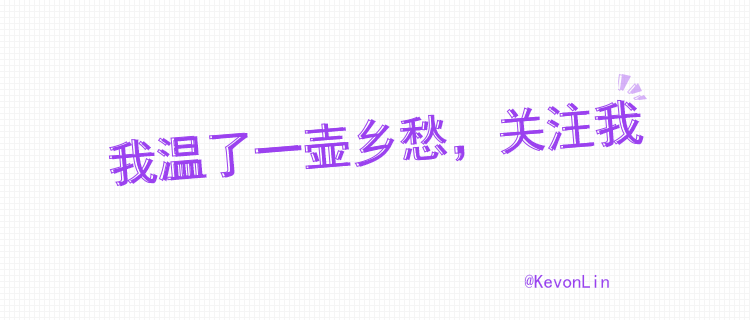
<style>
.page{position:relative;width:750px;height:320px;background:#ffffff}
.page>*{position:absolute;margin:0}
.t1{font:50.5px "SimHei";color:#9b41ef;scale:0.96 1}
.t2{font:19px "SimHei";color:#9b41ef}
</style>
<div class="page">
<p class="t1" style="left:112px;top:100px;width:532px;height:87px;rotate:-5deg">我温了一壶乡愁，关注我</p>
<p class="t2" style="left:524px;top:274px;width:85px;height:14px">@KevonLin</p>
</div>
